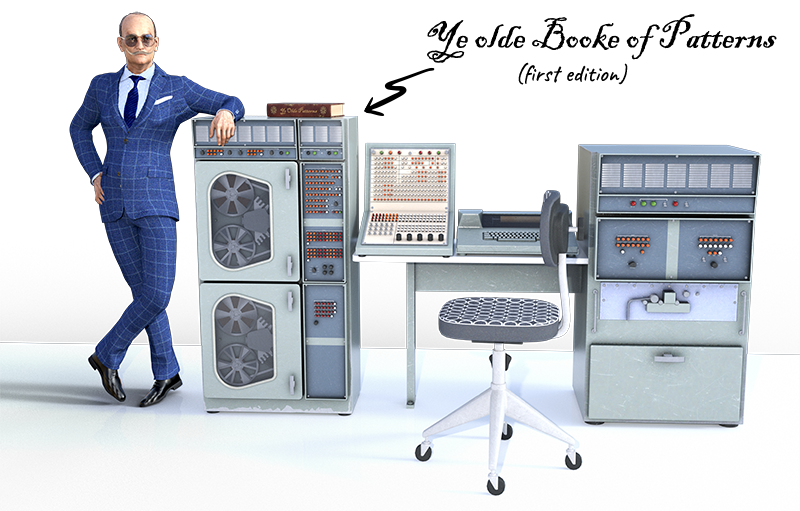
<style>
.page{position:relative;width:800px;height:511px;background:#ffffff}
.page>*{position:absolute;margin:0}
.t1{font:40px "BlackadderITC-Regular";color:#010101}
.t2{font:24px "Caveat-Regular";color:#010101}
</style>
<div class="page">
<p class="t1" style="left:427px;top:14px;width:350px;height:49px">Ye olde Booke of Patterns</p>
<p class="t2" style="left:518px;top:62px;width:110px;height:23px">(first edition)</p>
</div>
